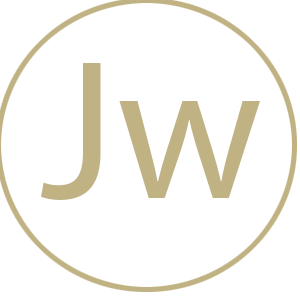
<style>
.page{position:relative;width:300px;height:300px;background:#ffffff}
.page>*{position:absolute;margin:0}
.t1{font:200px "MyriadPro-Regular";color:#c0b283}
</style>
<div class="page">
<p class="t1" style="left:41px;top:63px;width:219px;height:137px">Jw</p>
</div>
